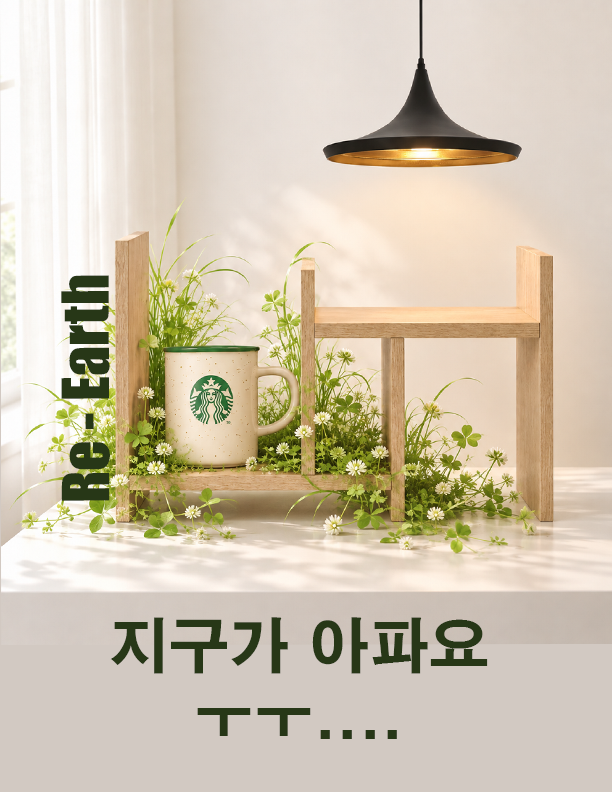
<style>
.page{position:relative;width:612px;height:792px}
.page>*{position:absolute;margin:0}
.t1{font:60px "Impact";color:#273717}
.t2{font:60px "H2gtrE";color:#273717}
</style>
<div class="page">
<p class="t1" style="left:61px;top:275px;width:49px;height:226px;rotate:180deg">Re - Earth</p>
<p class="t2" style="left:110px;top:617px;width:378px;height:122px;text-align:center">지구가 아파요 ㅜㅜ....</p>
</div>
